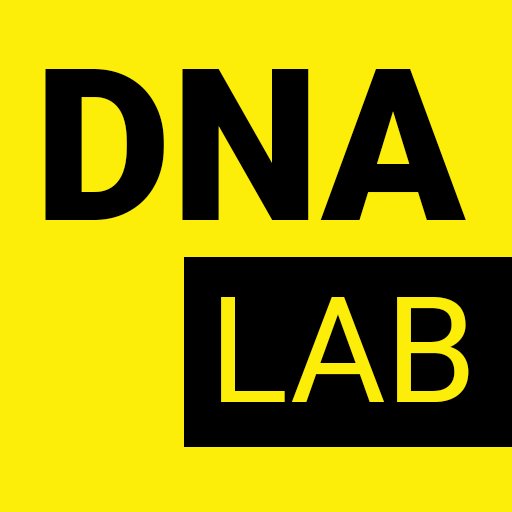
<style>
.page{position:relative;width:512px;height:512px;background:#fcee09}
.page>*{position:absolute;margin:0}
.t1{font:212.5px "Roboto-Black";color:#000000}
.t2{font:146.7px "Roboto-Regular";color:#fcee09}
</style>
<div class="page">
<p class="t1" style="left:45px;top:69px;width:421px;height:151px">DNA</p>
<p class="t2" style="left:221px;top:297px;width:248px;height:105px">LAB</p>
</div>
